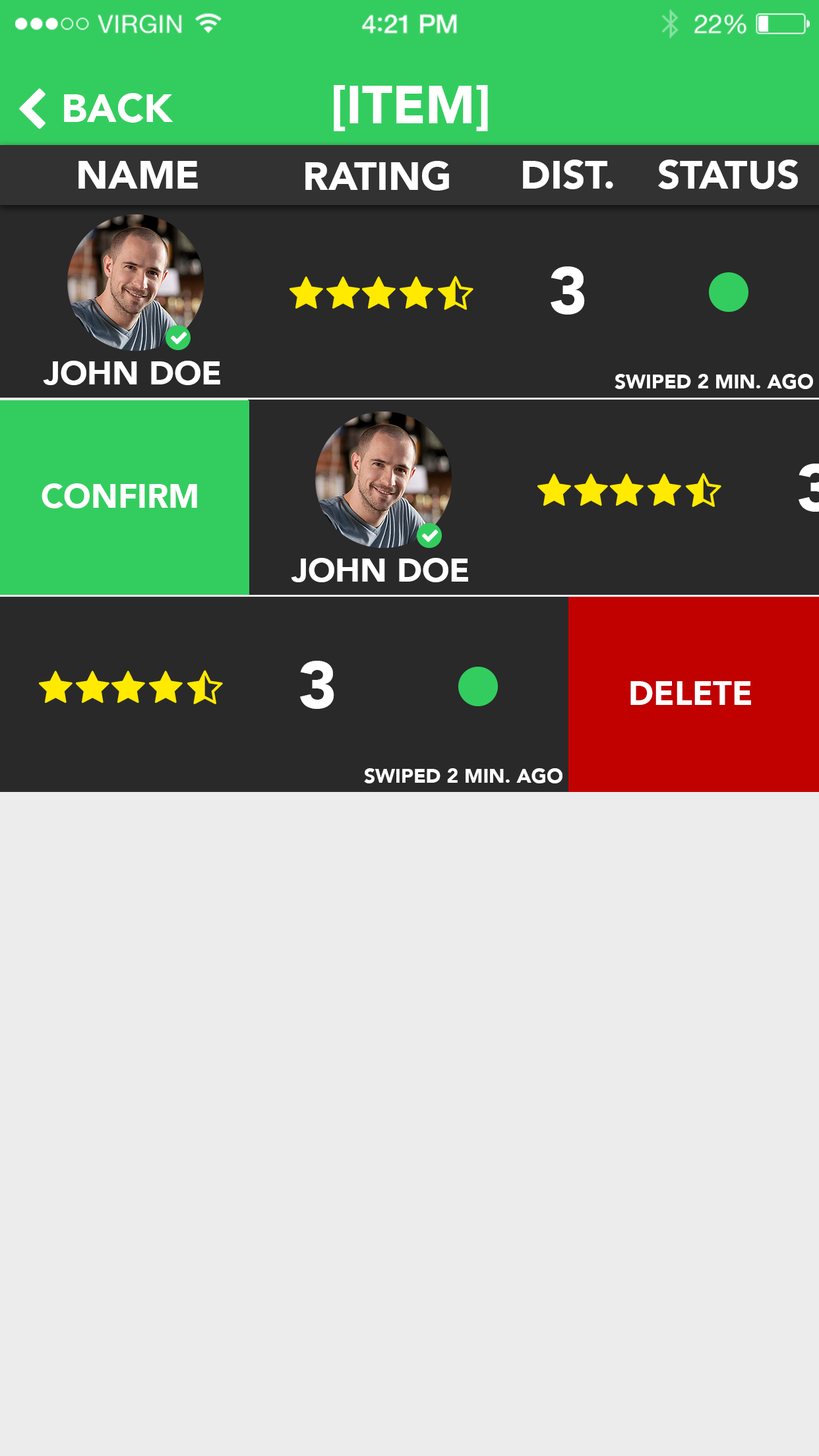
<style>
.page{position:relative;width:819px;height:1456px;background:#ececec}
.page>*{position:absolute;margin:0}
.t1{font:52.8px "Avenir-Black";color:#ffffff}
.t2{font:39.6px "Avenir-Black";color:#ffffff}
.t3{font:65.9px "Avenir-Black";color:#ffffff}
.t4{font:33px "Avenir-Black";color:#ffffff}
.t5{font:19.8px "Avenir-Black";color:#ffffff}
.t6{font:33.4px "Avenir-Black";color:#ffffff}
.t7{font:33.5px "Avenir-Black";color:#ffffff}
</style>
<div class="page">
<p class="t1" style="left:334px;top:85px;width:154px;height:46px">[ITEM]</p>
<p class="t2" style="left:64px;top:93px;width:109px;height:30px">BACK</p>
<p class="t2" style="left:78px;top:161px;width:120px;height:28px">NAME</p>
<p class="t2" style="left:305px;top:161px;width:144px;height:30px">RATING</p>
<p class="t2" style="left:523px;top:160px;width:90px;height:29px">DIST.</p>
<p class="t2" style="left:658px;top:160px;width:140px;height:29px">STATUS</p>
<p class="t3" style="left:551px;top:266px;width:34px;height:49px">3</p>
<p class="t4" style="left:43px;top:361px;width:177px;height:24px">JOHN DOE</p>
<p class="t5" style="left:615px;top:374px;width:198px;height:15px">SWIPED 2 MIN. AGO</p>
<p class="t6" style="left:42px;top:483px;width:155px;height:25px">CONFIRM</p>
<p class="t7" style="left:630px;top:681px;width:121px;height:24px">DELETE</p>
</div>
